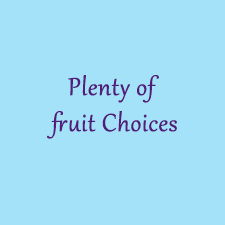
<style>
.page{position:relative;width:225px;height:225px;background:#a3e2f8}
.page>*{position:absolute;margin:0}
.t1{font:30px "Gabriola";color:#541d7b;font-weight:bold}
</style>
<div class="page">
<p class="t1" style="left:47px;top:75px;width:130px;height:64px;text-align:center">Plenty of <br>fruit Choices</p>
</div>
